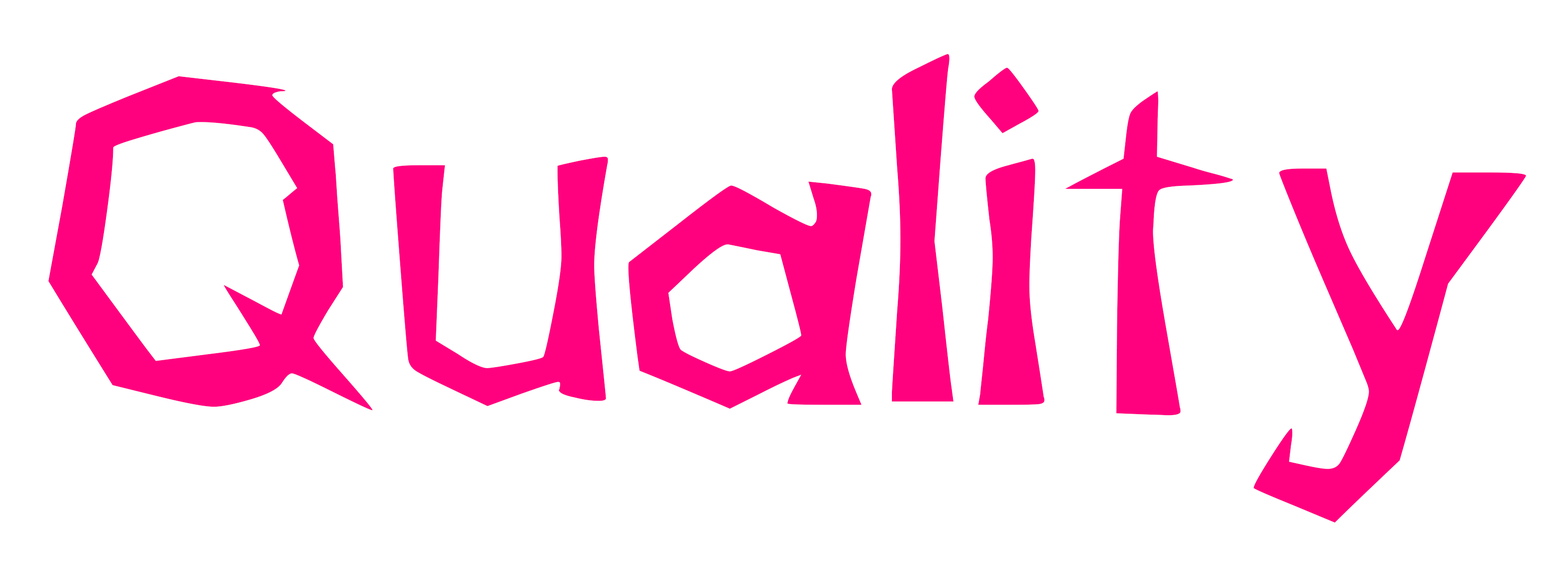
<style>
.page{position:relative;width:1568px;height:571px;background:#ffffff}
.page>*{position:absolute;margin:0}
.t1{font:654.4px "BasebrawlMain-Regular";color:#ff007f}
</style>
<div class="page">
<p class="t1" style="left:48px;top:54px;width:1478px;height:469px">Quality</p>
</div>
